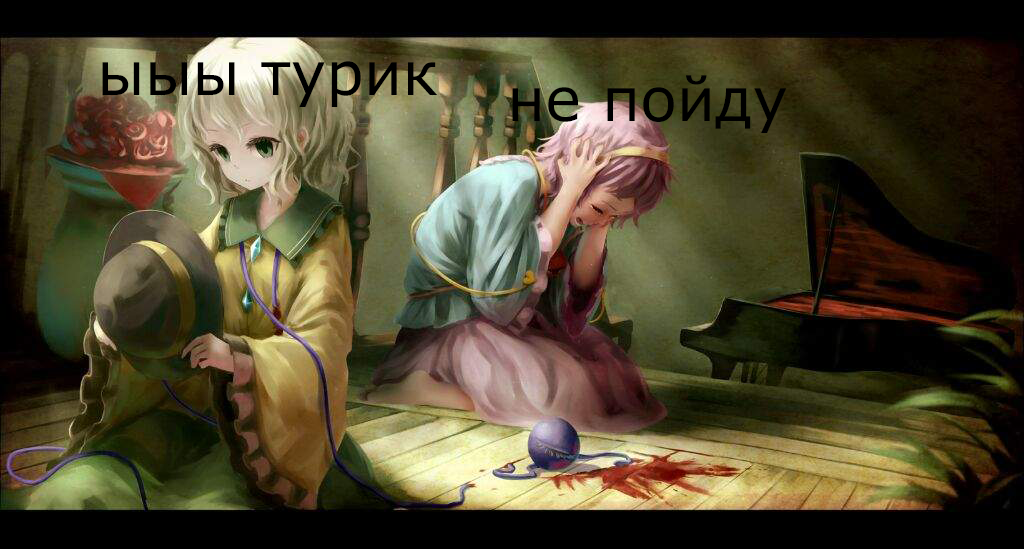
<style>
.page{position:relative;width:1024px;height:549px}
.page>*{position:absolute;margin:0}
.t1{font:60px "Verdana";color:#000000}
</style>
<div class="page">
<p class="t1" style="left:102px;top:61px;width:336px;height:46px">ыыы турик</p>
<p class="t1" style="left:512px;top:75px;width:275px;height:58px">не пойду</p>
</div>
